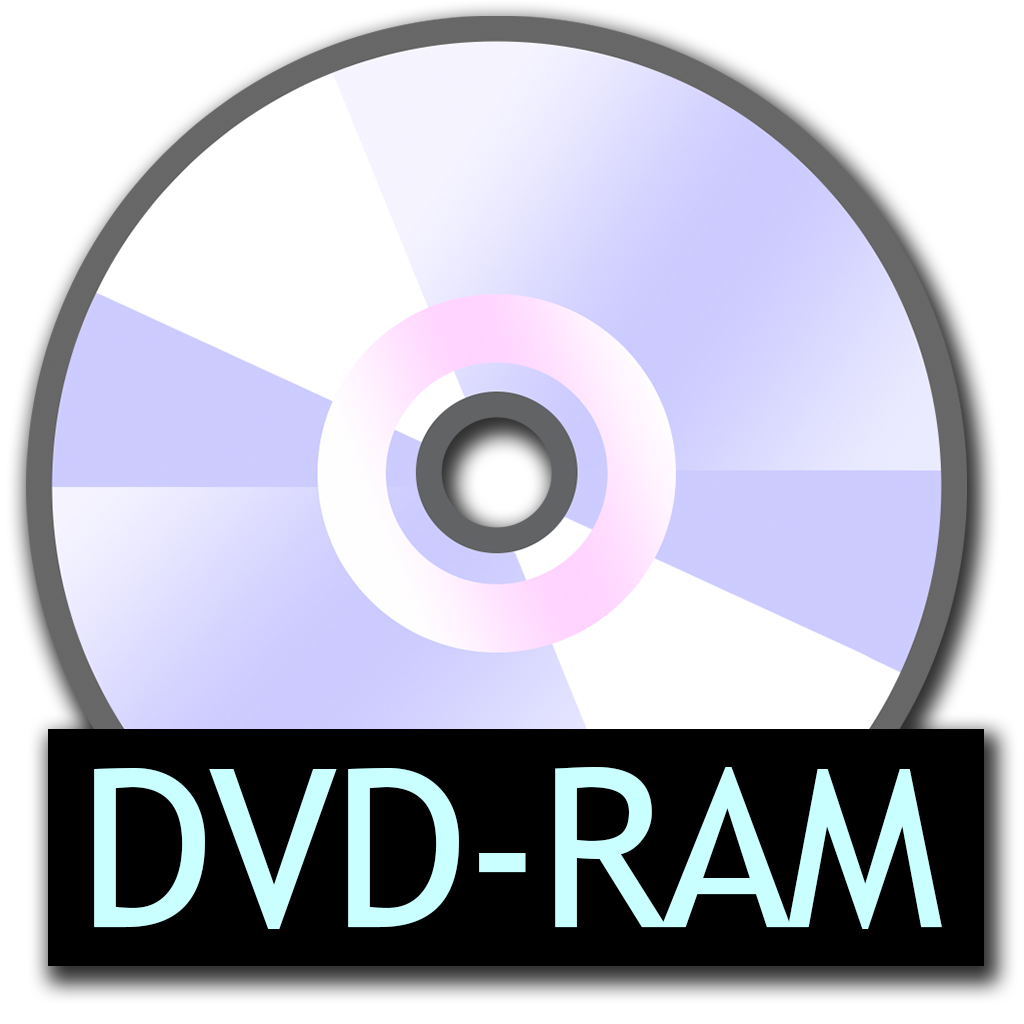
<style>
.page{position:relative;width:1024px;height:1024px;background:#ffffff}
.page>*{position:absolute;margin:0}
.t1{font:220.9px "TrebuchetMS";letter-spacing:-0.025em;color:#caffff}
</style>
<div class="page">
<p class="t1" style="left:94px;top:767px;width:848px;height:162px">DVD-RAM</p>
</div>
